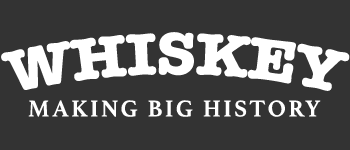
<style>
.page{position:relative;width:350px;height:150px;background:#333333}
.page>*{position:absolute;margin:0}
.t1{font:61px "AmericanTypewriter-Bold";letter-spacing:-0.015em;color:#ffffff}
.t2{font:24px "Athelas-Bold";letter-spacing:0.105em;color:#ffffff}
</style>
<div class="page">
<p class="t1" style="left:1px;top:32px;width:349px;height:59px">WHISKEY</p>
<p class="t2" style="left:28px;top:100px;width:293px;height:17px">MAKING BIG HISTORY</p>
</div>
